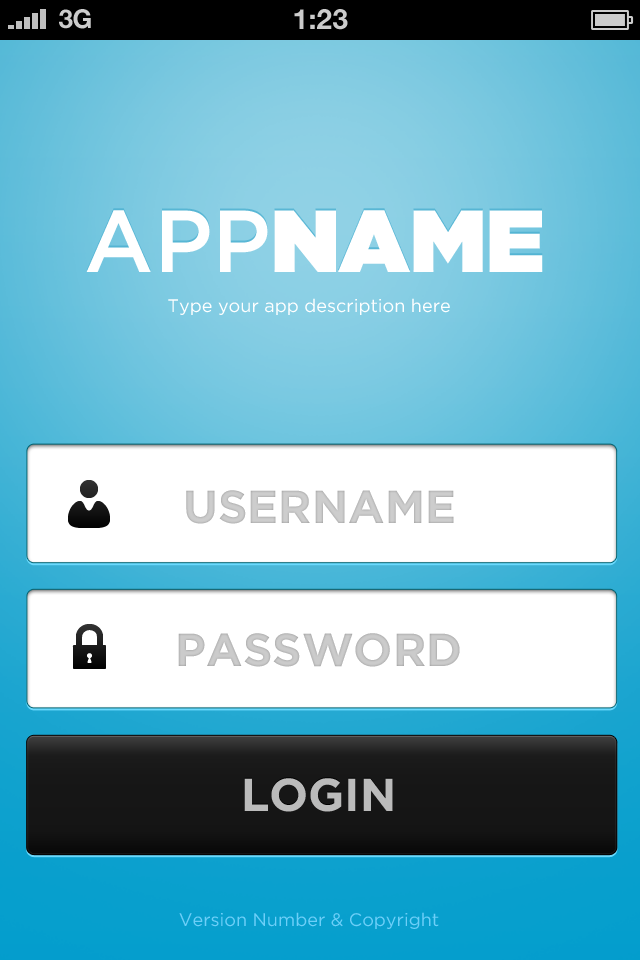
<style>
.page{position:relative;width:640px;height:960px;background:#ffffff}
.page>*{position:absolute;margin:0}
.t1{font:26px "HelveticaNeue-Bold";color:#cccccc;text-transform:uppercase}
.t2{font:28px "HelveticaNeue-Bold";color:#cccccc;text-transform:uppercase}
.t3{font:87.7px "Gotham-Ultra";color:#ffffff}
.t4{font:87.7px "Gotham-Medium";color:#ffffff}
.t5{font:18.1px "Gotham-Book";color:#ffffff}
.t6{font:46.1px "Gotham-Bold";color:#c9c9c9}
.t7{font:46.1px "Gotham-Bold";color:#c7c7c7}
.t8{font:46.1px "Gotham-Bold";color:#bbbbbb}
.t9{font:18.1px "Gotham-Book";color:#6dcff8}
</style>
<div class="page">
<p class="t1" style="left:59px;top:9px;width:32px;height:20px">3G</p>
<p class="t2" style="left:294px;top:9px;width:54px;height:21px">1:23</p>
<p class="t3" style="left:86px;top:210px;width:457px;height:62px"><span class="t4">APP</span>NAME</p>
<p class="t5" style="left:168px;top:298px;width:282px;height:17px">Type your app description here</p>
<p class="t6" style="left:186px;top:490px;width:268px;height:34px">USERNAME</p>
<p class="t7" style="left:178px;top:633px;width:282px;height:34px">PASSWORD</p>
<p class="t8" style="left:244px;top:778px;width:149px;height:34px">LOGIN</p>
<p class="t9" style="left:179px;top:912px;width:260px;height:17px">Version Number &amp; Copyright</p>
</div>
